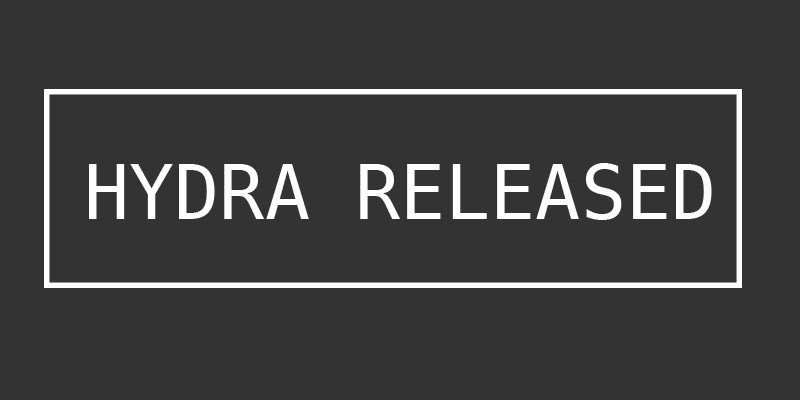
<style>
.page{position:relative;width:800px;height:400px;background:#333333}
.page>*{position:absolute;margin:0}
.t1{font:75.8px "DejaVuSansMono";color:#ffffff}
</style>
<div class="page">
<p class="t1" style="left:89px;top:163px;width:623px;height:57px">HYDRA RELEASED</p>
</div>
